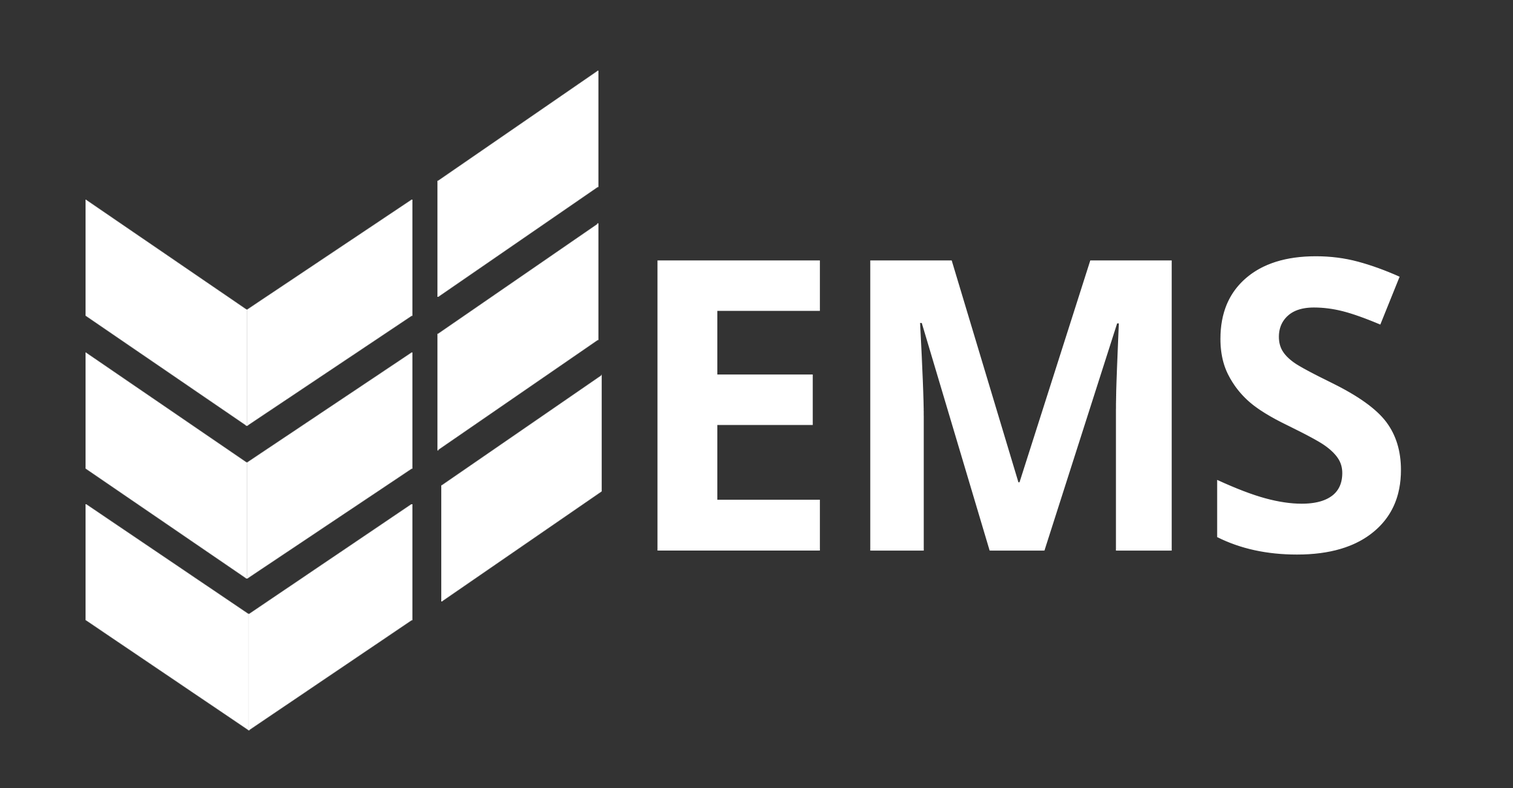
<style>
.page{position:relative;width:1513px;height:788px;background:#333333}
.page>*{position:absolute;margin:0}
.t1{font:406.3px "OpenSans-Bold";letter-spacing:-0.02em;color:#ffffff}
</style>
<div class="page">
<p class="t1" style="left:657px;top:256px;width:744px;height:299px">EMS</p>
</div>
